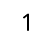
<style>
.page{position:relative;width:53px;height:41px;background:#ffffff}
.page>*{position:absolute;margin:0}
.t1{font:23.7px "DroidSans";color:#000000}
</style>
<div class="page">
<p class="t1" style="left:23px;top:13px;width:6px;height:18px">1</p>
</div>
